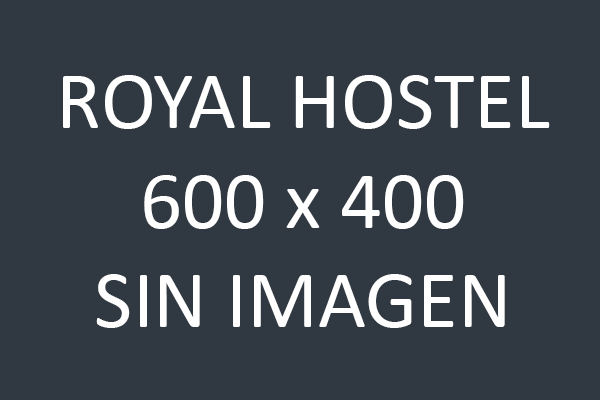
<style>
.page{position:relative;width:600px;height:400px;background:#303841}
.page>*{position:absolute;margin:0}
.t1{font:83px "Calibri";color:#ffffff}
</style>
<div class="page">
<p class="t1" style="left:63px;top:75px;width:487px;height:253px;text-align:center">ROYAL HOSTEL<br>600 x 400<br>SIN IMAGEN</p>
</div>
